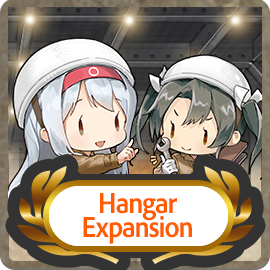
<style>
.page{position:relative;width:270px;height:270px}
.page>*{position:absolute;margin:0}
.t1{font:30px/24px "AdobeClean-Bold";letter-spacing:-0.04em;color:#ff5d00;scale:0.9 1}
</style>
<div class="page">
<p class="t1" style="left:83px;top:193px;width:109px;height:51px;text-align:center">Hangar<br>Expansion</p>
</div>
